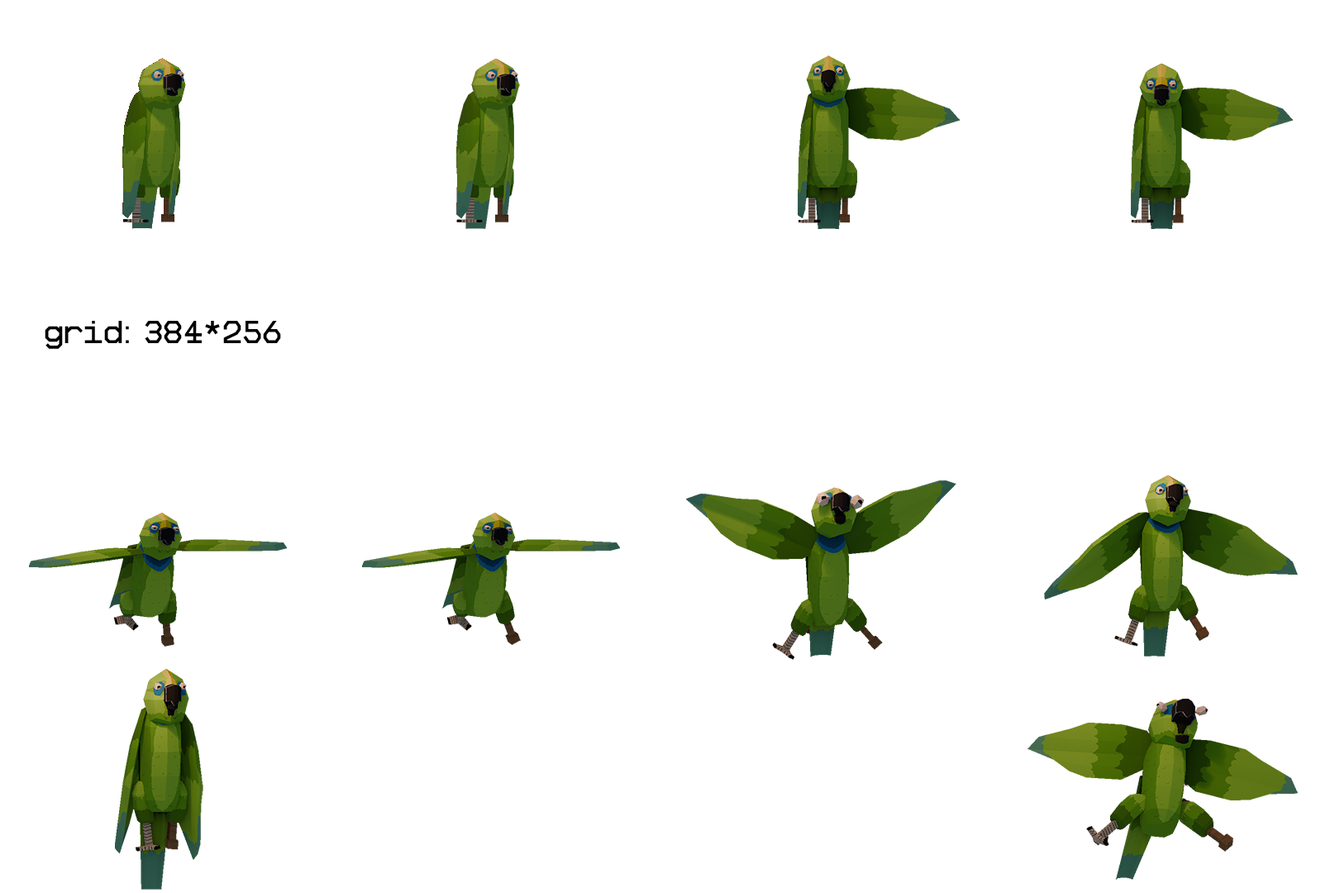
<style>
.page{position:relative;width:1335px;height:893px;background:#ffffff}
.page>*{position:absolute;margin:0}
.t1{font:29.8px "BigPixelDemo";color:#000000}
</style>
<div class="page">
<p class="t1" style="left:45px;top:321px;width:236px;height:28px">grid:384*256</p>
</div>
